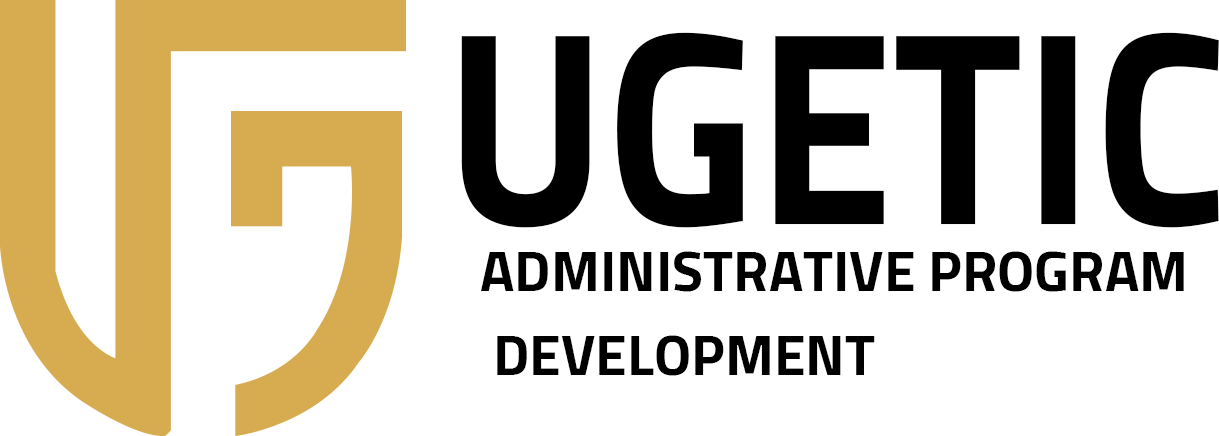
<style>
.page{position:relative;width:1219px;height:436px;background:#ffffff}
.page>*{position:absolute;margin:0}
.t1{font:276.3px "Cairo-Bold";color:#000000;text-transform:uppercase;scale:0.89 1}
.t2{font:57.1px/83.3px "Cairo-Bold";color:#000000;text-transform:uppercase}
</style>
<div class="page">
<p class="t1" style="left:461px;top:32px;width:758px;height:196px">ugetic</p>
<p class="t2" style="left:481px;top:251px;width:703px;height:125px">Administrative program<br> development</p>
</div>
